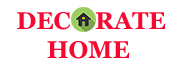
<style>
.page{position:relative;width:176px;height:71px;background:#ffffff}
.page>*{position:absolute;margin:0}
.t1{font:24px "Georgia-Bold";color:#f50930}
</style>
<div class="page">
<p class="t1" style="left:17px;top:12px;width:149px;height:47px">DEC    RATE<br>         HOME</p>
</div>
